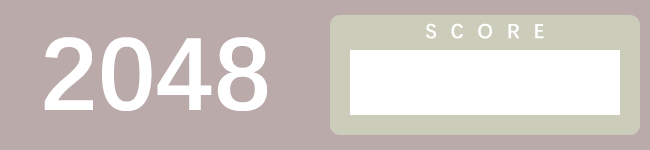
<style>
.page{position:relative;width:650px;height:150px;background:#bbaaaa}
.page>*{position:absolute;margin:0}
.t1{font:20.8px "DengXian-Bold";letter-spacing:0.66em;color:#ffffff}
.t2{font:104.2px "DengXian-Bold";color:#ffffff}
</style>
<div class="page">
<p class="t1" style="left:426px;top:23px;width:118px;height:16px">SCORE</p>
<p class="t2" style="left:44px;top:37px;width:223px;height:74px">2048</p>
</div>
